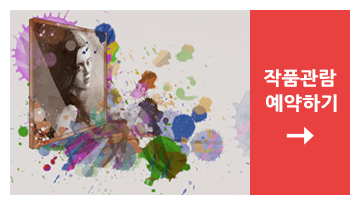
<style>
.page{position:relative;width:360px;height:200px;background:#e94040}
.page>*{position:absolute;margin:0}
.t1{font:18.5px "NanumGothicExtraBold";color:#ffffff;scale:1.05 1}
</style>
<div class="page">
<p class="t1" style="left:264px;top:69px;width:73px;height:18px">작품관람</p>
<p class="t1" style="left:266px;top:94px;width:71px;height:18px">예약하기</p>
</div>
